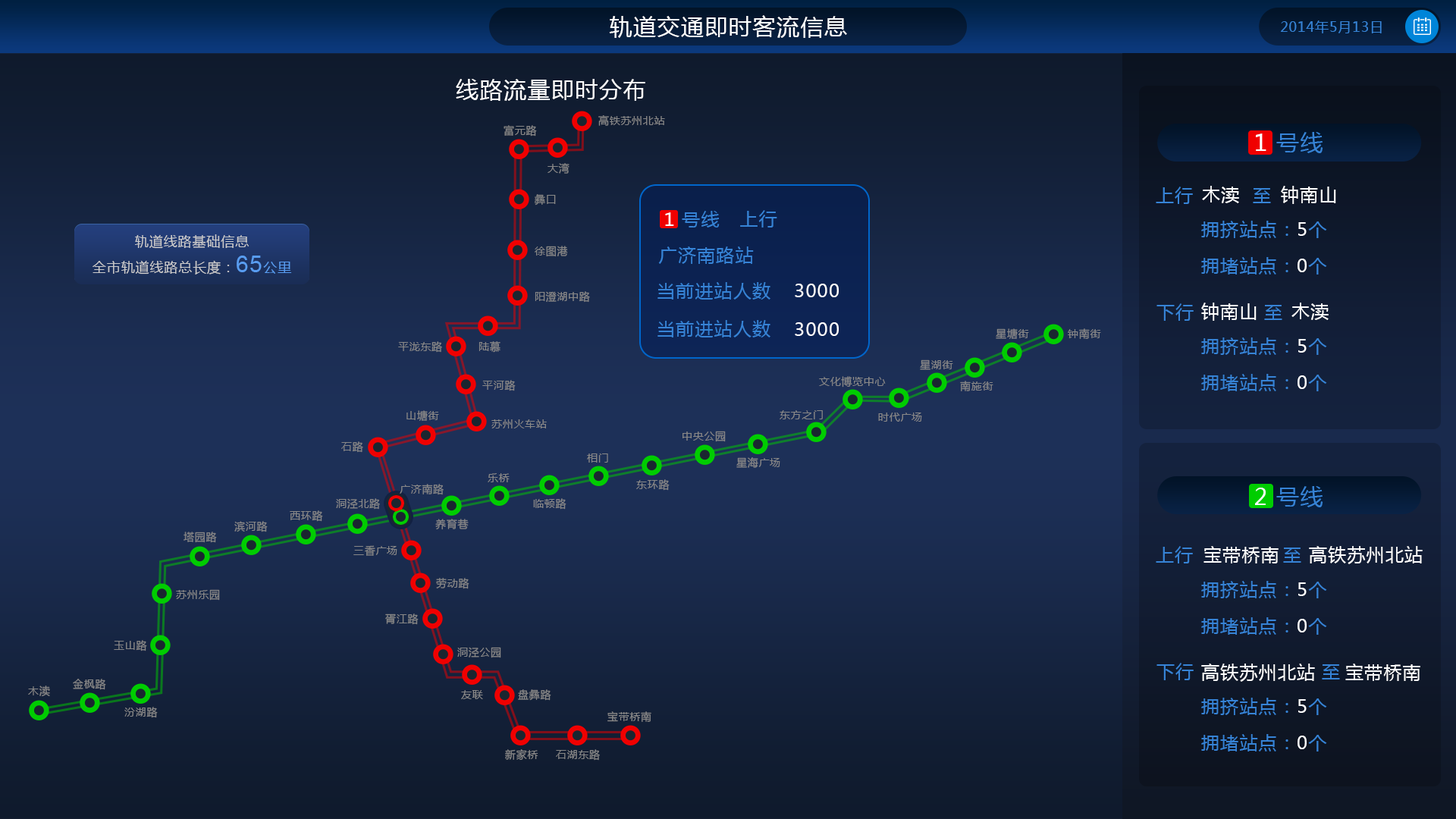
<style>
.page{position:relative;width:1456px;height:819px}
.page>*{position:absolute;margin:0}
.t1{font:22.7px "MicrosoftYaHei";letter-spacing:0.05em;color:#ffffff}
.t2{font:13.6px "MicrosoftYaHei";letter-spacing:0.05em;color:#3683d6}
.t3{font:10.6px "MicrosoftYaHei";letter-spacing:0.05em;color:#888888}
.t4{font:22.7px "MicrosoftYaHei";letter-spacing:0.05em;color:#3683d6}
.t5{font:18.2px "MicrosoftYaHei";letter-spacing:0.05em;color:#ffffff}
.t6{font:18.2px "MicrosoftYaHei";letter-spacing:0.05em;color:#3683d6}
.t7{font:18.2px/36.4px "MicrosoftYaHei";letter-spacing:0.05em;color:#3683d6}
.t8{font:18.2px/36.4px "MicrosoftYaHei";letter-spacing:0.05em;color:#ffffff}
.t9{font:13.6px/25.8px "MicrosoftYaHei";letter-spacing:0.05em;color:#cccccc}
.t10{font:22.7px/25.8px "ArialMT";letter-spacing:0.05em;color:#589cf0}
.t11{font:13.6px/25.8px "MicrosoftYaHei";letter-spacing:0.05em;color:#589cf0}
</style>
<div class="page">
<p class="t1" style="left:609px;top:15px;width:238px;height:23px">轨道交通即时客流信息</p>
<p class="t2" style="left:1281px;top:20px;width:101px;height:13px">2014年5月13日</p>
<p class="t1" style="left:456px;top:79px;width:189px;height:22px">线路流量即时分布</p>
<p class="t3" style="left:504px;top:125px;width:33px;height:11px">富元路</p>
<p class="t3" style="left:598px;top:115px;width:67px;height:11px">高铁苏州北站</p>
<p class="t4" style="left:1256px;top:132px;width:67px;height:21px"><span class="t1">1</span> 号线</p>
<p class="t3" style="left:548px;top:163px;width:22px;height:11px">大湾</p>
<p class="t5" style="left:1202px;top:186px;width:37px;height:17px">木渎</p>
<p class="t5" style="left:1281px;top:186px;width:55px;height:18px">钟南山</p>
<p class="t3" style="left:534px;top:194px;width:22px;height:12px">彝口</p>
<p class="t6" style="left:1156px;top:187px;width:37px;height:17px">上行</p>
<p class="t6" style="left:1253px;top:188px;width:18px;height:15px">至</p>
<p class="t6" style="left:665px;top:211px;width:55px;height:16px"><span class="t5">1</span> 号线</p>
<p class="t6" style="left:740px;top:210px;width:37px;height:17px">上行</p>
<p class="t7" style="left:1201px;top:221px;width:126px;height:54px">拥挤站点：<span class="t8">5</span>个<br>拥堵站点：<span class="t8">0</span>个</p>
<p class="t9" style="left:93px;top:234px;width:199px;height:41px;text-align:center">轨道线路基础信息<br>全市轨道线路总长度：<span class="t10">65</span><span class="t11">公里</span></p>
<p class="t3" style="left:535px;top:246px;width:33px;height:11px">徐图港</p>
<p class="t6" style="left:658px;top:246px;width:96px;height:18px">广济南路站</p>
<p class="t3" style="left:535px;top:291px;width:55px;height:12px">阳澄湖中路</p>
<p class="t6" style="left:657px;top:282px;width:113px;height:18px">当前进站人数</p>
<p class="t5" style="left:795px;top:284px;width:44px;height:13px">3000</p>
<p class="t6" style="left:1156px;top:303px;width:38px;height:18px">下行</p>
<p class="t5" style="left:1201px;top:303px;width:56px;height:18px">钟南山</p>
<p class="t6" style="left:1264px;top:305px;width:18px;height:15px">至</p>
<p class="t5" style="left:1291px;top:303px;width:38px;height:17px">木渎</p>
<p class="t6" style="left:657px;top:320px;width:113px;height:17px">当前进站人数</p>
<p class="t5" style="left:795px;top:322px;width:44px;height:14px">3000</p>
<p class="t3" style="left:996px;top:328px;width:33px;height:11px">星塘街</p>
<p class="t3" style="left:1068px;top:328px;width:33px;height:11px">钟南街</p>
<p class="t3" style="left:398px;top:341px;width:44px;height:12px">平泷东路</p>
<p class="t3" style="left:479px;top:341px;width:21px;height:12px">陆慕</p>
<p class="t7" style="left:1201px;top:337px;width:126px;height:54px">拥挤站点：<span class="t8">5</span>个<br>拥堵站点：<span class="t8">0</span>个</p>
<p class="t3" style="left:920px;top:359px;width:33px;height:11px">星湖街</p>
<p class="t3" style="left:819px;top:376px;width:67px;height:12px">文化博览中心</p>
<p class="t3" style="left:482px;top:380px;width:34px;height:11px">平河路</p>
<p class="t3" style="left:960px;top:381px;width:33px;height:10px">南施街</p>
<p class="t3" style="left:406px;top:410px;width:33px;height:11px">山塘街</p>
<p class="t3" style="left:780px;top:410px;width:43px;height:9px">东方之门</p>
<p class="t3" style="left:878px;top:413px;width:44px;height:9px">时代广场</p>
<p class="t3" style="left:491px;top:419px;width:56px;height:9px">苏州火车站</p>
<p class="t3" style="left:682px;top:431px;width:44px;height:11px">中央公园</p>
<p class="t3" style="left:341px;top:441px;width:22px;height:12px">石路</p>
<p class="t3" style="left:587px;top:453px;width:21px;height:10px">相门</p>
<p class="t3" style="left:736px;top:457px;width:44px;height:11px">星海广场</p>
<p class="t3" style="left:488px;top:473px;width:22px;height:9px">乐桥</p>
<p class="t3" style="left:400px;top:484px;width:44px;height:11px">广济南路</p>
<p class="t3" style="left:636px;top:479px;width:34px;height:12px">东环路</p>
<p class="t4" style="left:1255px;top:486px;width:68px;height:21px"><span class="t1">2</span> 号线</p>
<p class="t3" style="left:336px;top:498px;width:44px;height:12px">洞泾北路</p>
<p class="t3" style="left:533px;top:498px;width:33px;height:12px">临顿路</p>
<p class="t3" style="left:234px;top:521px;width:34px;height:11px">滨河路</p>
<p class="t3" style="left:290px;top:510px;width:33px;height:12px">西环路</p>
<p class="t3" style="left:435px;top:519px;width:34px;height:11px">养育巷</p>
<p class="t3" style="left:184px;top:532px;width:33px;height:11px">塔园路</p>
<p class="t3" style="left:353px;top:545px;width:44px;height:11px">三香广场</p>
<p class="t6" style="left:1156px;top:546px;width:37px;height:17px">上行</p>
<p class="t5" style="left:1203px;top:546px;width:76px;height:17px">宝带桥南</p>
<p class="t5" style="left:1309px;top:546px;width:114px;height:18px">高铁苏州北站</p>
<p class="t6" style="left:1283px;top:548px;width:18px;height:15px">至</p>
<p class="t3" style="left:436px;top:578px;width:33px;height:11px">劳动路</p>
<p class="t7" style="left:1201px;top:581px;width:126px;height:54px">拥挤站点：<span class="t8">5</span>个<br>拥堵站点：<span class="t8">0</span>个</p>
<p class="t3" style="left:176px;top:589px;width:44px;height:12px">苏州乐园</p>
<p class="t3" style="left:385px;top:613px;width:34px;height:12px">胥江路</p>
<p class="t3" style="left:114px;top:640px;width:33px;height:11px">玉山路</p>
<p class="t3" style="left:457px;top:647px;width:44px;height:11px">洞泾公园</p>
<p class="t6" style="left:1156px;top:663px;width:38px;height:17px">下行</p>
<p class="t5" style="left:1201px;top:664px;width:114px;height:18px">高铁苏州北站</p>
<p class="t6" style="left:1322px;top:664px;width:18px;height:15px">至</p>
<p class="t5" style="left:1345px;top:664px;width:75px;height:17px">宝带桥南</p>
<p class="t3" style="left:28px;top:686px;width:22px;height:11px">木渎</p>
<p class="t3" style="left:73px;top:679px;width:33px;height:11px">金枫路</p>
<p class="t3" style="left:518px;top:689px;width:33px;height:12px">盘彝路</p>
<p class="t3" style="left:461px;top:690px;width:22px;height:9px">友联</p>
<p class="t7" style="left:1201px;top:698px;width:126px;height:53px">拥挤站点：<span class="t8">5</span>个<br>拥堵站点：<span class="t8">0</span>个</p>
<p class="t3" style="left:124px;top:707px;width:34px;height:11px">汾湖路</p>
<p class="t3" style="left:607px;top:711px;width:44px;height:11px">宝带桥南</p>
<p class="t3" style="left:505px;top:749px;width:33px;height:11px">新家桥</p>
<p class="t3" style="left:556px;top:749px;width:44px;height:12px">石湖东路</p>
</div>
